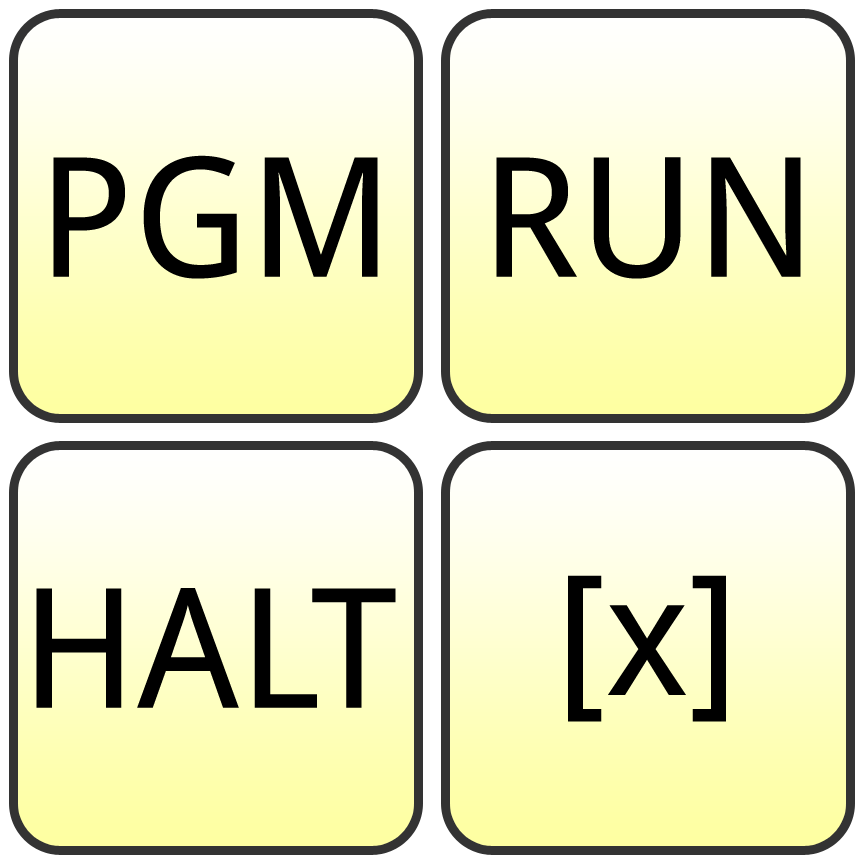
<style>
.page{position:relative;width:864px;height:864px}
.page>*{position:absolute;margin:0}
.t1{font:166.7px "DroidSans";color:#000000}
</style>
<div class="page">
<p class="t1" style="left:53px;top:155px;width:325px;height:124px">PGM</p>
<p class="t1" style="left:496px;top:157px;width:305px;height:122px">RUN</p>
<p class="t1" style="left:568px;top:575px;width:158px;height:147px">[x]</p>
<p class="t1" style="left:36px;top:588px;width:360px;height:120px">HALT</p>
</div>
